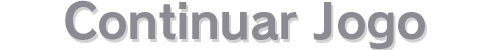
<style>
.page{position:relative;width:490px;height:50px;background:#ffffff}
.page>*{position:absolute;margin:0}
.t1{font:48px "RodinPro-B";letter-spacing:-0.016em;color:#8c8b93}
</style>
<div class="page">
<p class="t1" style="left:65px;top:0px;width:360px;height:49px">Continuar Jogo</p>
</div>
